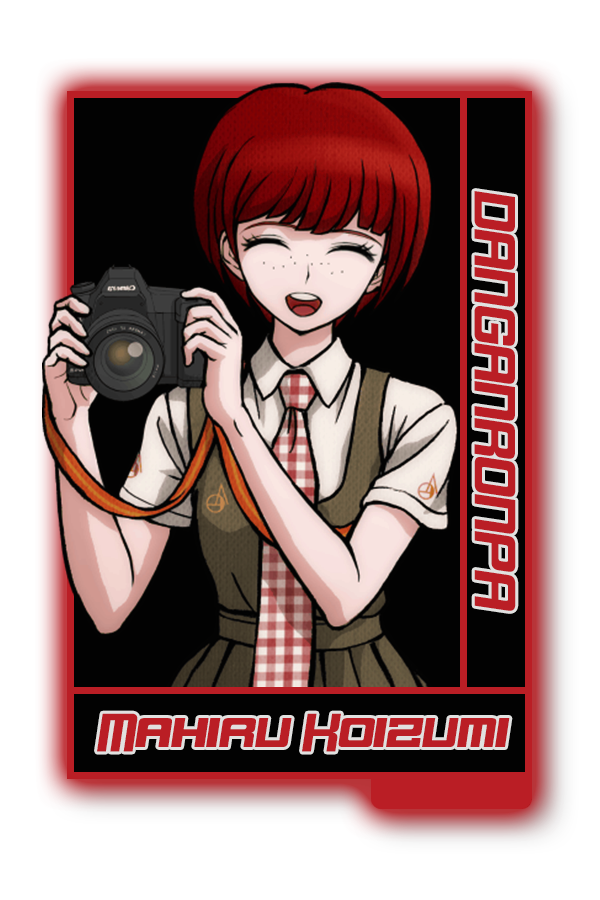
<style>
.page{position:relative;width:600px;height:900px;background:#ffffff}
.page>*{position:absolute;margin:0}
.t1{font:48.8px "DorBlue";color:#bb2c2e}
.t2{font:45.6px "DorBlue";color:#bb2c2e}
</style>
<div class="page">
<p class="t1" style="left:474px;top:191px;width:42px;height:420px;rotate:90deg">DANGANRONPA</p>
<p class="t2" style="left:97px;top:713px;width:413px;height:39px">Mahiru Koizumi</p>
</div>
